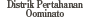
<style>
.page{position:relative;width:90px;height:19px;background:#ffffff}
.page>*{position:absolute;margin:0}
.t1{font:10px/9px "RyuminPro-ExBold";letter-spacing:-0.04em;color:#4c4843;scale:0.9 1}
</style>
<div class="page">
<p class="t1" style="left:7px;top:0px;width:76px;height:17px;text-align:center">Distrik Pertahanan<br>Oominato</p>
</div>
